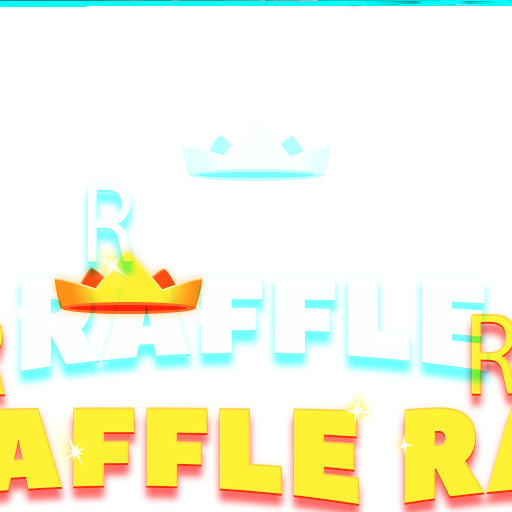
<style>
.page{position:relative;width:512px;height:512px;background:#ffffff}
.page>*{position:absolute;margin:0}
.t1{font:119.8px "MyriadPro-Regular";letter-spacing:-0.05em;color:#fdffff;scale:0.87 1}
.t2{font:134.2px "PeaceSans";letter-spacing:0.025em;color:#fdffff;scale:0.87 1}
</style>
<div class="page">
<p class="t1" style="left:87px;top:175px;width:47px;height:81px">R</p>
<p class="t2" style="left:20px;top:268px;width:467px;height:97px">RAFFLE</p>
</div>
